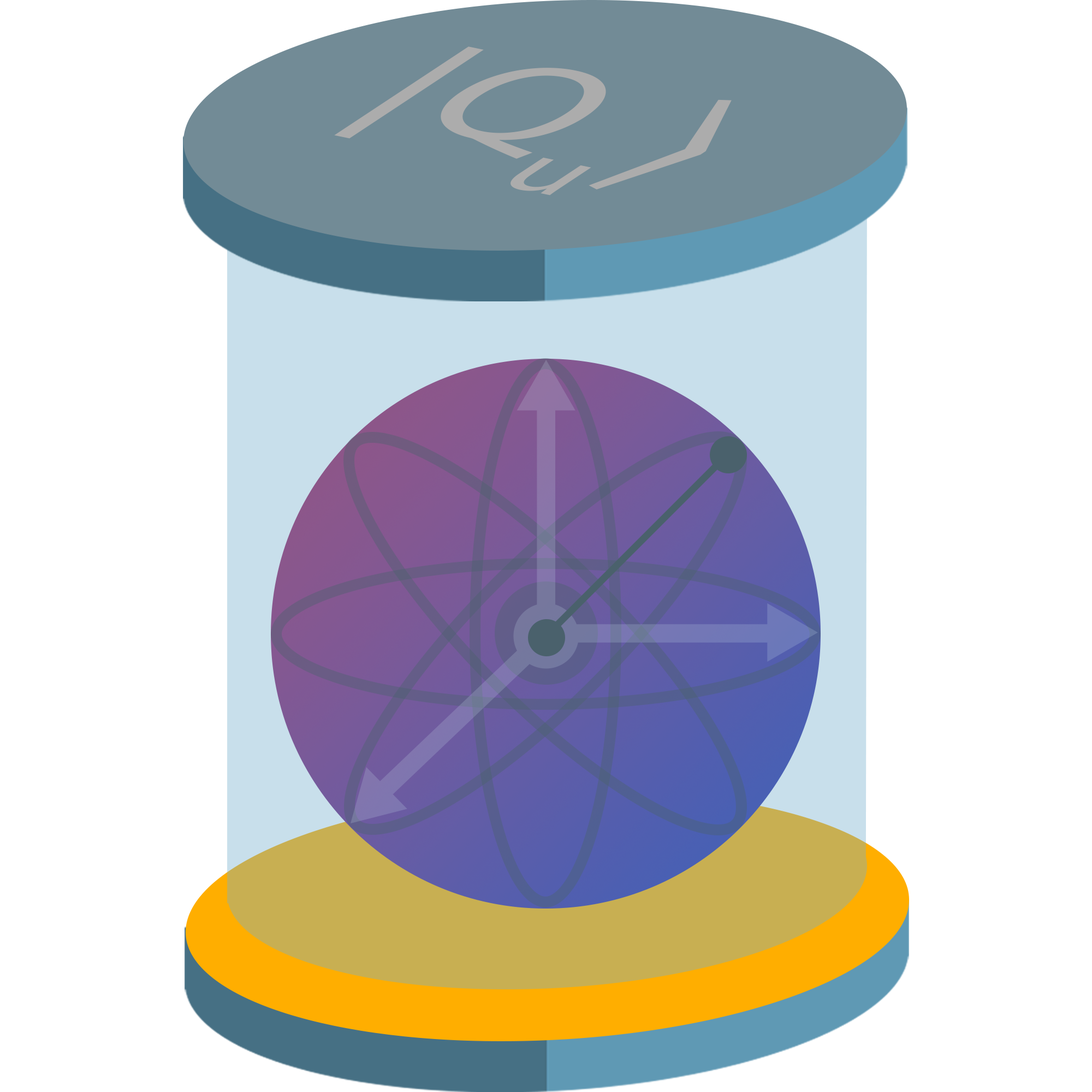
<style>
.page{position:relative;width:1092px;height:1092px;background:#ffffff}
.page>*{position:absolute;margin:0}
.t1{font:176.8px "MyriadPro-Regular";color:#acacac;scale:1.16 1}
.t2{font:176.8px "CambriaMath";color:#acacac;scale:1.16 1}
</style>
<div class="page">
<p class="t1" style="left:334px;top:46px;width:398px;height:149px;rotate:12deg"><span class="t2">|</span>Qu<span class="t2">⟩</span></p>
</div>
